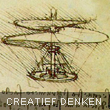
<style>
.page{position:relative;width:110px;height:110px}
.page>*{position:absolute;margin:0}
.t1{font:10px "ArialMT";color:#dedcd4}
</style>
<div class="page">
<p class="t1" style="left:7px;top:98px;width:94px;height:7px">CREATIEF DENKEN</p>
</div>
